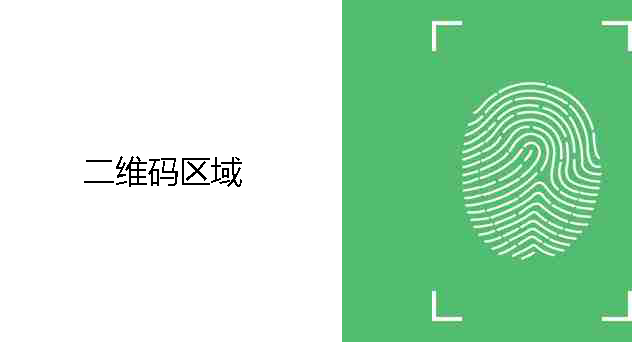
<style>
.page{position:relative;width:632px;height:342px;background:#ffffff}
.page>*{position:absolute;margin:0}
.t1{font:32px "MicrosoftYaHei";color:#000000}
</style>
<div class="page">
<p class="t1" style="left:84px;top:156px;width:158px;height:31px">二维码区域</p>
</div>
